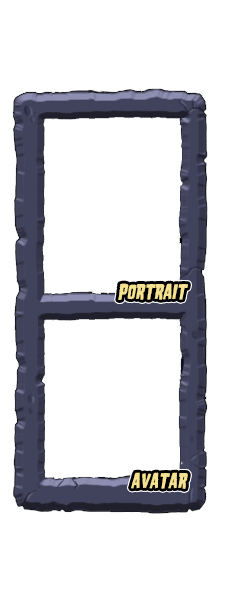
<style>
.page{position:relative;width:230px;height:600px;background:#ffffff}
.page>*{position:absolute;margin:0}
.t1{font:21.3px "HouseofTerror";letter-spacing:-0.02em;color:#f5e290;font-style:italic;scale:0.94 1}
</style>
<div class="page">
<p class="t1" style="left:118px;top:283px;width:70px;height:17px">PORTRAIT</p>
<p class="t1" style="left:131px;top:472px;width:57px;height:17px">AVATAR</p>
</div>
